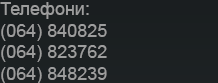
<style>
.page{position:relative;width:218px;height:83px}
.page>*{position:absolute;margin:0}
.t1{font:18px "ArialMT";color:#9d9d9d}
</style>
<div class="page">
<p class="t1" style="left:0px;top:2px;width:107px;height:82px">Телефони:<br>(064) 840825<br>(064) 823762<br>(064) 848239</p>
</div>
